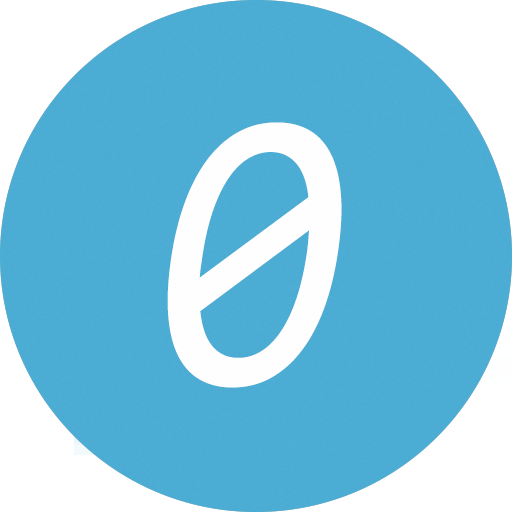
<style>
.page{position:relative;width:512px;height:512px;background:#4dadd4}
.page>*{position:absolute;margin:0}
.t1{font:403.9px "Consolas";letter-spacing:0.025em;color:#fefefe;font-style:italic;scale:0.88 1}
</style>
<div class="page">
<p class="t1" style="left:167px;top:122px;width:175px;height:266px">0</p>
</div>
